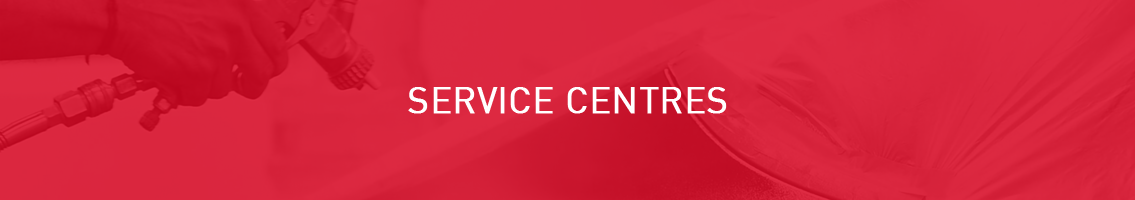
<style>
.page{position:relative;width:1135px;height:200px}
.page>*{position:absolute;margin:0}
.t1{font:36px "DIN-Regular";color:#ffffff;font-weight:bold}
</style>
<div class="page">
<p class="t1" style="left:408px;top:87px;width:319px;height:27px">SERVICE CENTRES</p>
</div>
